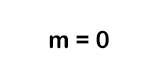
<style>
.page{position:relative;width:160px;height:75px;background:#ffffff}
.page>*{position:absolute;margin:0}
.t1{font:24px "ArialRoundedMTBold";color:#000000}
</style>
<div class="page">
<p class="t1" style="left:49px;top:30px;width:60px;height:19px">m = 0</p>
</div>
